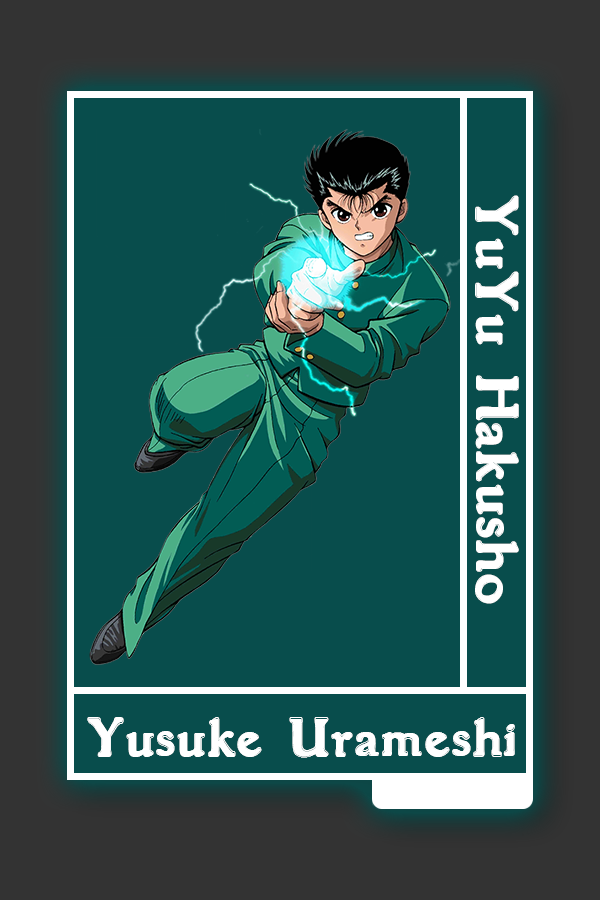
<style>
.page{position:relative;width:600px;height:900px;background:#084d4c}
.page>*{position:absolute;margin:0}
.t1{font:55.2px "GranthamOutline";color:#ffffff}
.t2{font:50.5px "GranthamOutline";color:#ffffff}
</style>
<div class="page">
<p class="t1" style="left:475px;top:195px;width:44px;height:409px;rotate:90deg">YuYu Hakusho</p>
<p class="t2" style="left:87px;top:717px;width:428px;height:41px">Yusuke Urameshi</p>
</div>
